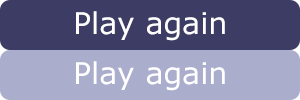
<style>
.page{position:relative;width:300px;height:100px;background:#aaadcc}
.page>*{position:absolute;margin:0}
.t1{font:30px "Verdana";color:#ffffff}
</style>
<div class="page">
<p class="t1" style="left:76px;top:11px;width:149px;height:30px">Play again</p>
<p class="t1" style="left:76px;top:61px;width:149px;height:30px">Play again</p>
</div>
